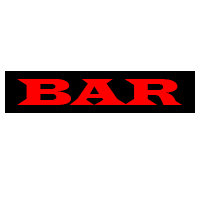
<style>
.page{position:relative;width:200px;height:200px;background:#ffffff}
.page>*{position:absolute;margin:0}
.t1{font:39px "LatinWide";color:#ff0000}
</style>
<div class="page">
<p class="t1" style="left:17px;top:79px;width:165px;height:26px">BAR</p>
</div>
